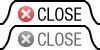
<style>
.page{position:relative;width:100px;height:50px;background:#ffffff}
.page>*{position:absolute;margin:0}
.t1{font:18px "HelveticaNeue-Condensed";color:#000000}
.t2{font:18px "HelveticaNeue-Condensed";color:#666666}
</style>
<div class="page">
<p class="t1" style="left:38px;top:7px;width:44px;height:14px">CLOSE</p>
<p class="t2" style="left:38px;top:32px;width:44px;height:14px">CLOSE</p>
</div>
